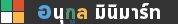
<style>
.page{position:relative;width:178px;height:24px;background:#333333}
.page>*{position:absolute;margin:0}
.t1{font:22px "Cloud-Bold";color:#ffffff}
.t2{font:28px "Cloud-Bold";color:#54a4e0}
.t3{font:22px "Cloud-Bold";color:#4a9478}
.t4{font:22px "Cloud-Bold";color:#3c5075}
.t5{font:22px "Cloud-Bold";color:#f5b952}
</style>
<div class="page">
<p class="t1" style="left:38px;top:3px;width:122px;height:21px"><span class="t2">อ</span>นุ<span class="t3">ก</span><span class="t4">ู</span><span class="t5">ล</span> มินิมาร์ท</p>
</div>
